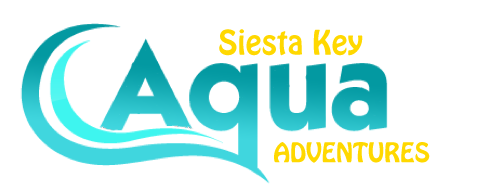
<style>
.page{position:relative;width:504px;height:186px;background:#ffffff}
.page>*{position:absolute;margin:0}
.t1{font:30px "HoboStd";color:#ffd800}
.t2{font:24px "HoboStd";color:#ffd800}
</style>
<div class="page">
<p class="t1" style="left:219px;top:29px;width:144px;height:27px">Siesta Key</p>
<p class="t2" style="left:274px;top:142px;width:156px;height:21px">ADVENTURES</p>
</div>
